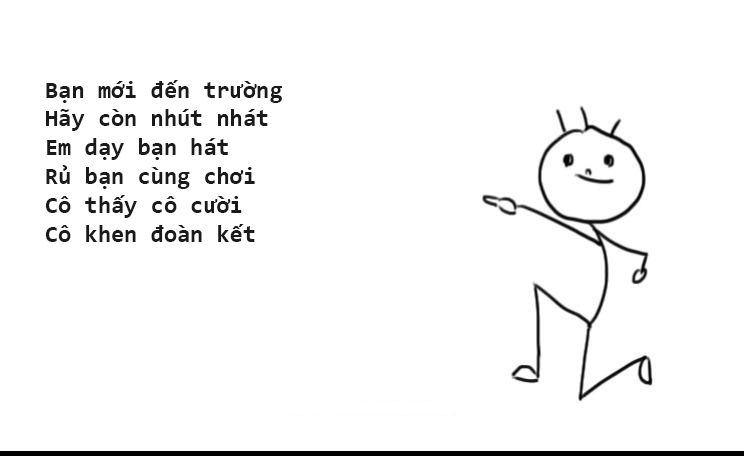
<style>
.page{position:relative;width:744px;height:456px;background:#ffffff}
.page>*{position:absolute;margin:0}
.t1{font:24px "Consolas-Bold";color:#1a1a1a}
</style>
<div class="page">
<p class="t1" style="left:45px;top:80px;width:237px;height:162px">Bạn mới đến trường<br>Hãy còn nhút nhát<br>Em dạy bạn hát<br>Rủ bạn cùng chơi<br>Cô thấy cô cười<br>Cô khen đoàn kết</p>
</div>
